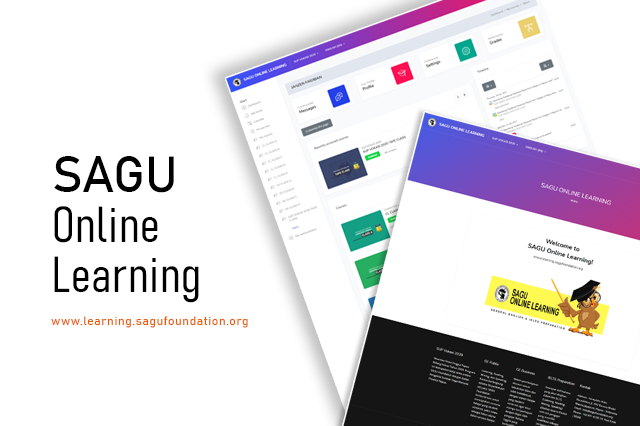
<style>
.page{position:relative;width:640px;height:426px;background:#ffffff}
.page>*{position:absolute;margin:0}
.t1{font:50px/50px "Bahnschrift-LightCondensed";letter-spacing:0.01em;color:#000000}
.t2{font:50px/50px "Bahnschrift";letter-spacing:0.01em;color:#000000}
.t3{font:12px "Bahnschrift-SemiLight";letter-spacing:0.05em;color:#e85d04}
</style>
<div class="page">
<p class="t1" style="left:54px;top:156px;width:145px;height:147px"><span class="t2">SAGU <br></span>Online <br>Learning</p>
<p class="t3" style="left:51px;top:316px;width:197px;height:12px">www.learning.sagufoundation.org</p>
</div>
